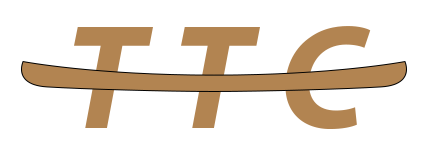
<style>
.page{position:relative;width:427px;height:153px;background:#ffffff}
.page>*{position:absolute;margin:0}
.t1{font:150px "MyriadPro-BoldIt";color:#b28451}
</style>
<div class="page">
<p class="t1" style="left:74px;top:26px;width:297px;height:103px">T T C</p>
</div>
